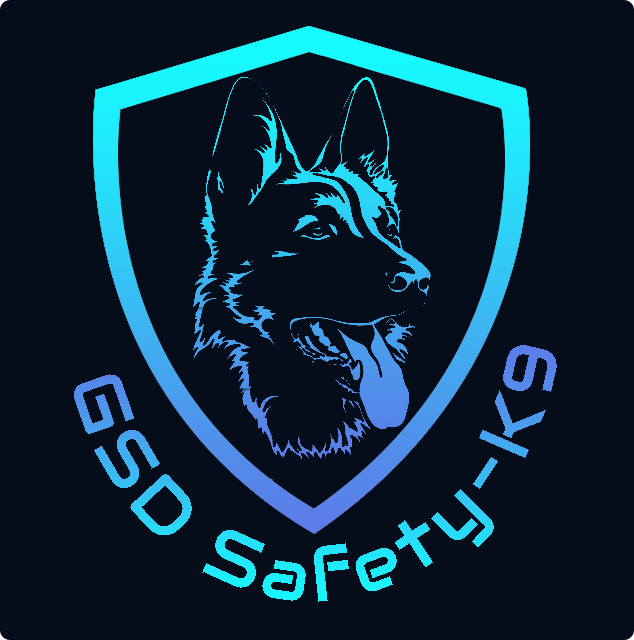
<style>
.page{position:relative;width:634px;height:640px;background:#050d1a}
.page>*{position:absolute;margin:0}
.t1{font:72px "Audiowide-Regular";letter-spacing:0.12em}
</style>
<div class="page">
<p class="t1" style="left:74px;top:345px;width:483px;height:257px;text-align:center">GSD Safety-K9</p>
</div>
